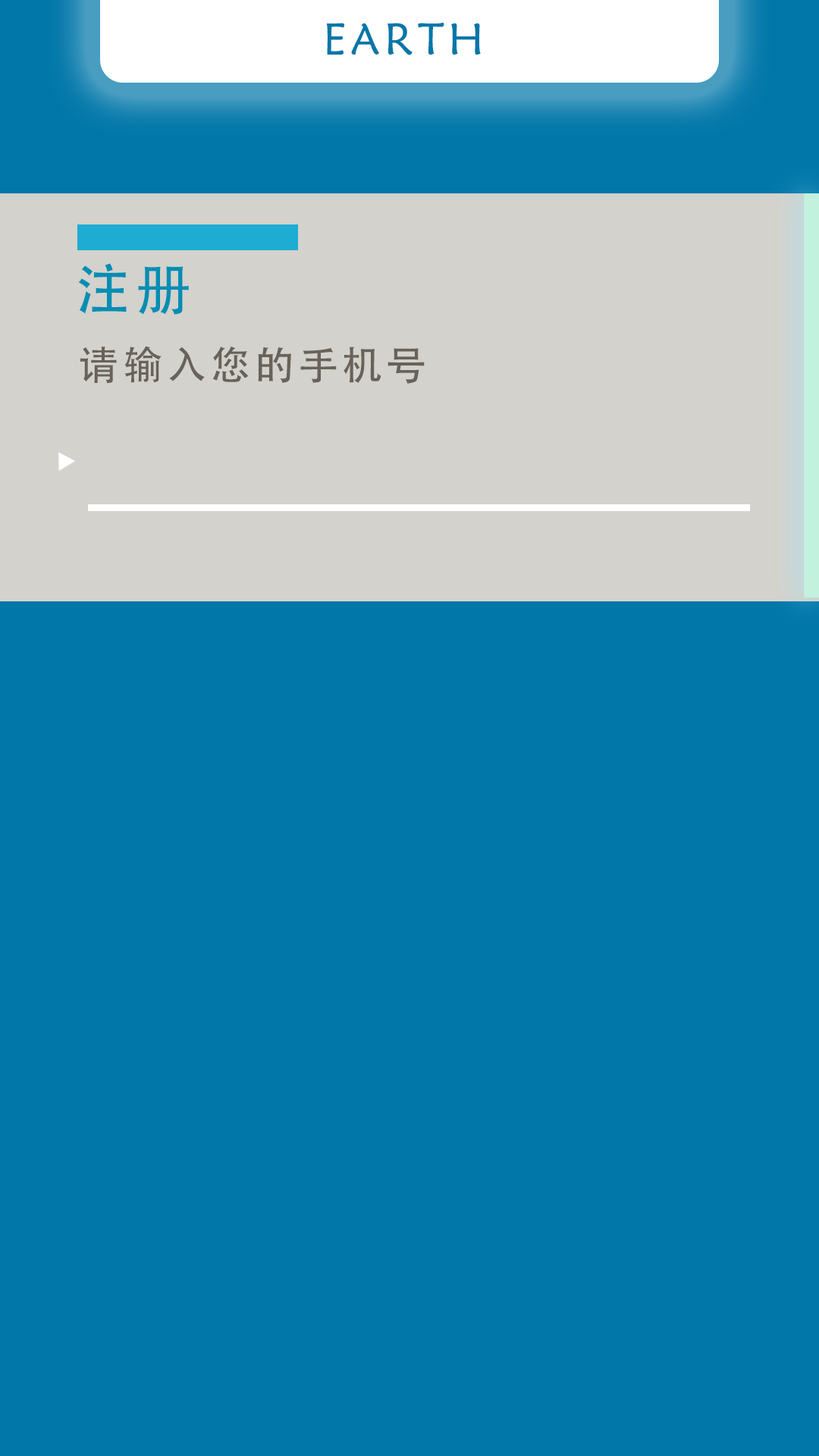
<style>
.page{position:relative;width:819px;height:1456px;background:#0177a9}
.page>*{position:absolute;margin:0}
.t1{font:44.5px "STXinwei";letter-spacing:0.1em;color:#0177a9}
.t2{font:55.2px "AdobeHeitiStd-Regular";letter-spacing:0.1em;color:#008eb4}
.t3{font:39.9px "AdobeHeitiStd-Regular";letter-spacing:0.1em;color:#686259}
</style>
<div class="page">
<p class="t1" style="left:326px;top:22px;width:155px;height:33px">EARTH</p>
<p class="t2" style="left:78px;top:263px;width:111px;height:52px">注册</p>
<p class="t3" style="left:80px;top:346px;width:345px;height:38px">请输入您的手机号</p>
</div>
